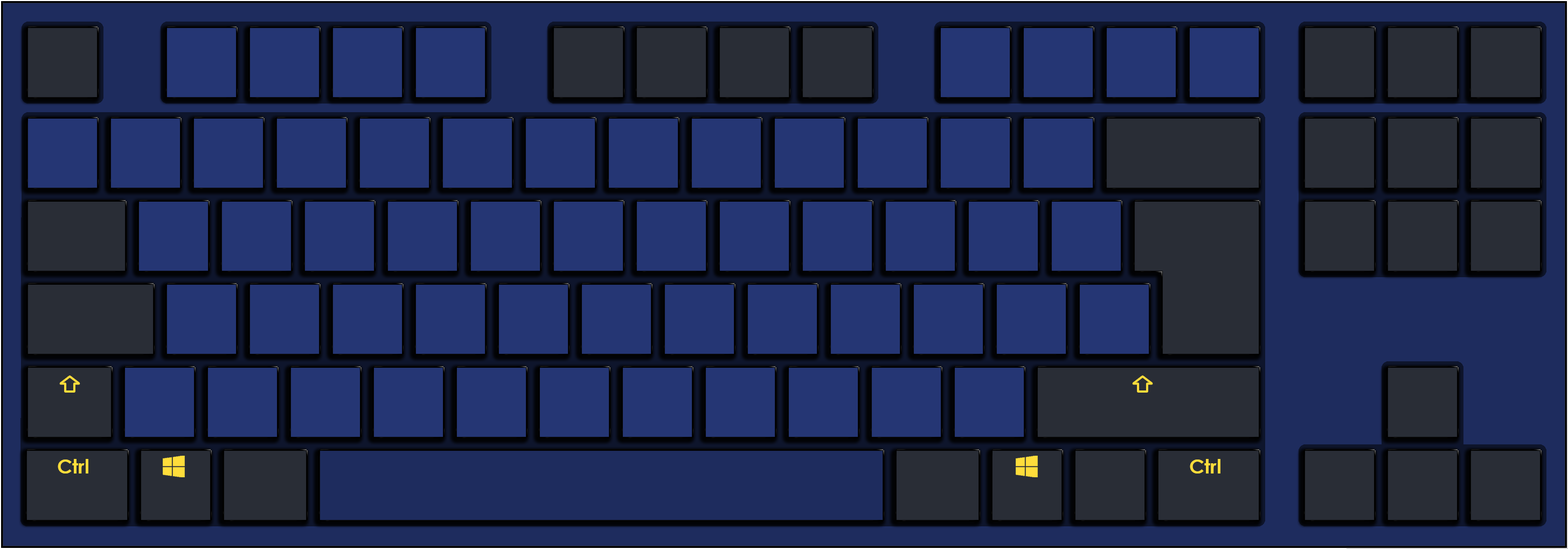
<style>
.page{position:relative;width:1568px;height:549px;background:#253674}
.page>*{position:absolute;margin:0}
.t1{font:19.4px "CenturyGothic-Bold";color:#ffdd3b}
</style>
<div class="page">
<p class="t1" style="left:58px;top:459px;width:30px;height:14px">Ctrl</p>
<p class="t1" style="left:1190px;top:459px;width:30px;height:14px">Ctrl</p>
</div>
